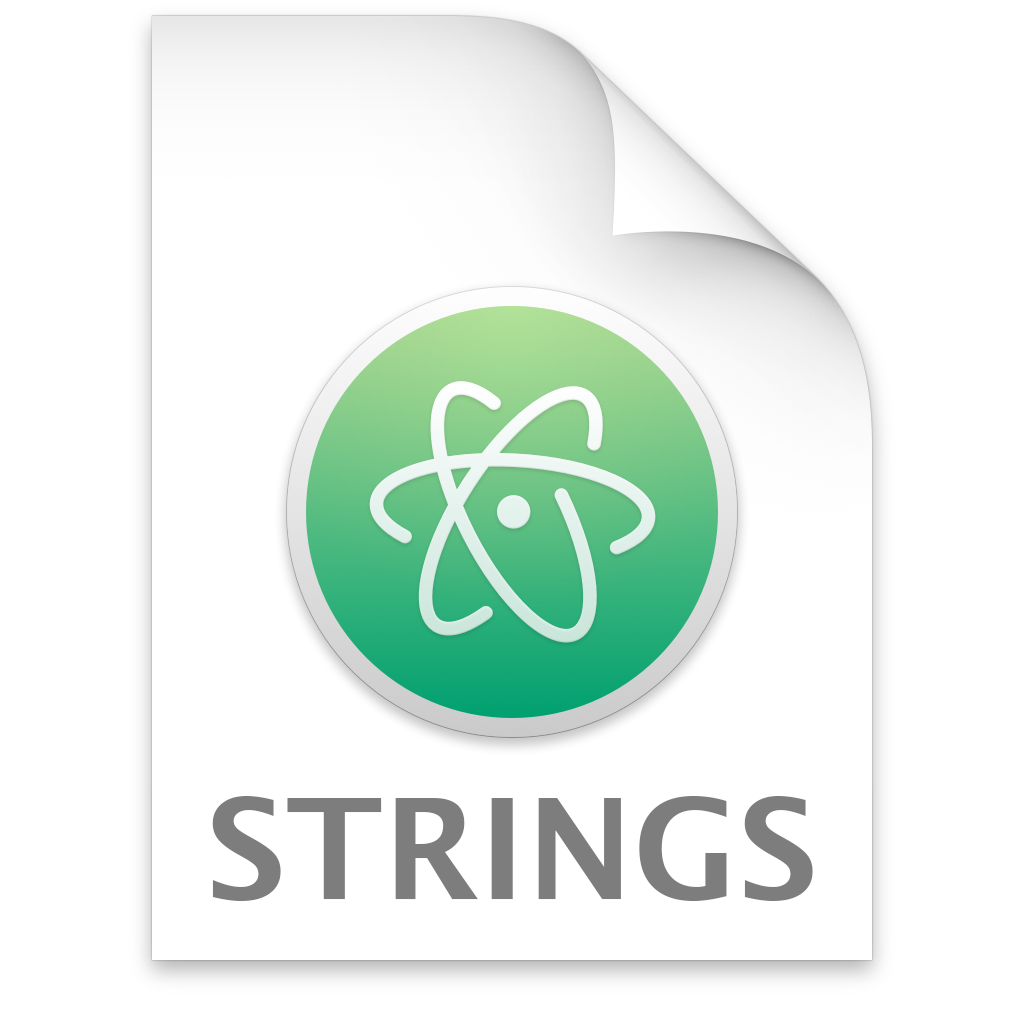
<style>
.page{position:relative;width:1024px;height:1024px;background:#ffffff}
.page>*{position:absolute;margin:0}
.t1{font:140px "LucidaGrande-Bold";color:#7d7d7d}
</style>
<div class="page">
<p class="t1" style="left:212px;top:796px;width:601px;height:105px">STRINGS</p>
</div>
